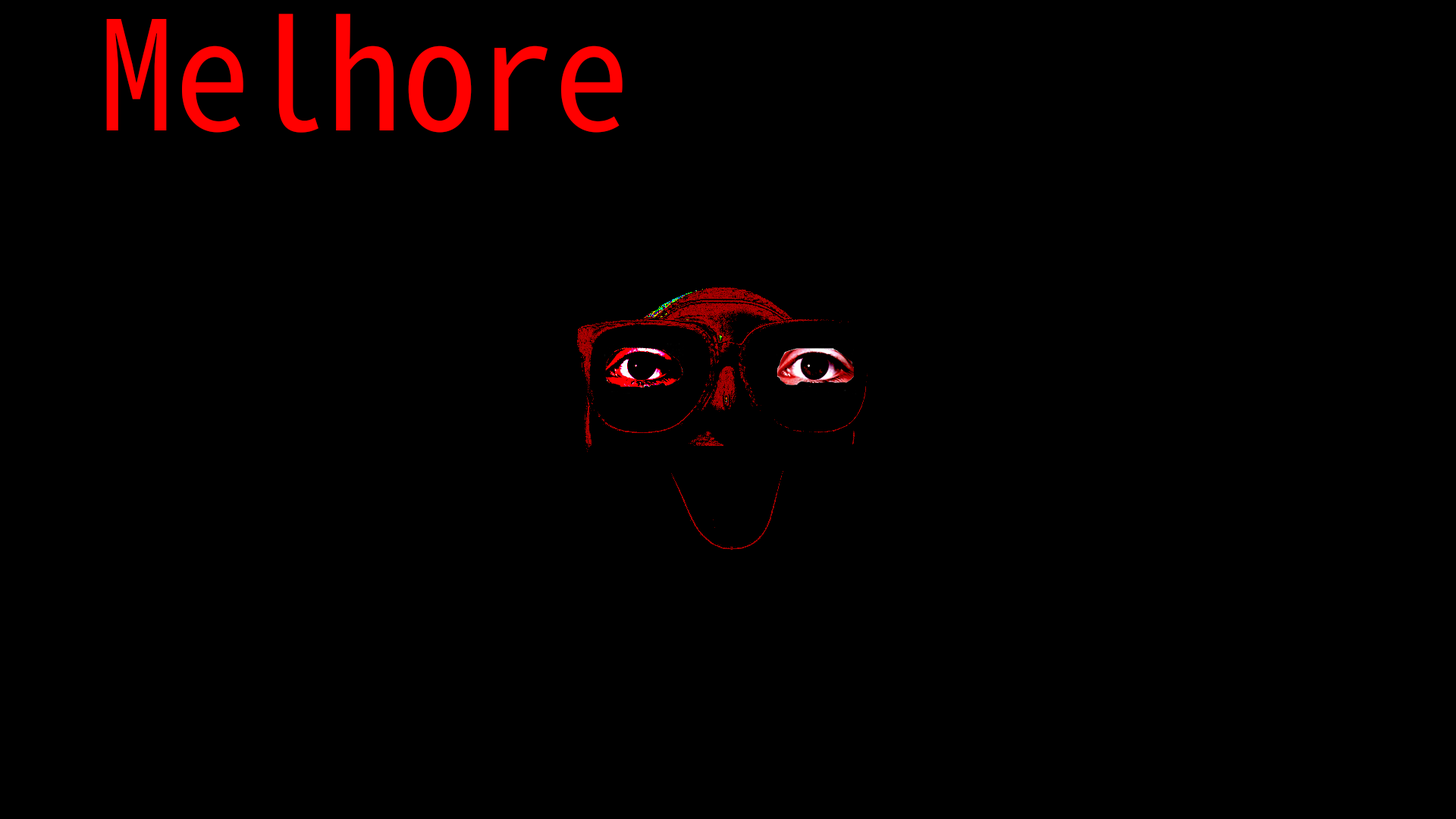
<style>
.page{position:relative;width:1456px;height:819px;background:#000000}
.page>*{position:absolute;margin:0}
.t1{font:151.7px "NotoSansMonoCJKtc-Regular";color:#ff0000}
</style>
<div class="page">
<p class="t1" style="left:105px;top:14px;width:518px;height:119px">Melhore</p>
</div>
